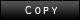
<style>
.page{position:relative;width:80px;height:20px}
.page>*{position:absolute;margin:0}
.t1{font:12px "Technic";letter-spacing:0.2em;color:#ffffff}
</style>
<div class="page">
<p class="t1" style="left:25px;top:6px;width:32px;height:8px">Copy</p>
</div>
